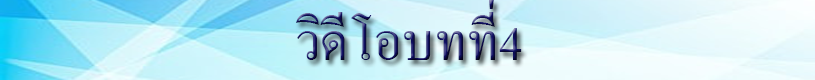
<style>
.page{position:relative;width:815px;height:80px}
.page>*{position:absolute;margin:0}
.t1{font:72px "AngsanaNew"}
</style>
<div class="page">
<p class="t1" style="left:296px;top:0px;width:226px;height:60px">วิดีโอบทที่4</p>
</div>
